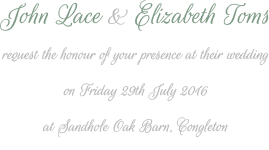
<style>
.page{position:relative;width:269px;height:150px;background:#ffffff}
.page>*{position:absolute;margin:0}
.t1{font:18px "RougeScript-Regular";color:#b9b9b9;font-style:italic}
.t2{font:30px "RougeScript-Regular";color:#7b9883;font-style:italic}
.t3{font:30px "RougeScript-Regular";color:#b9b9b9;font-style:italic}
</style>
<div class="page">
<p class="t1" style="left:0px;top:0px;width:269px;height:138px;text-align:center"><span class="t2">John Lace </span><span class="t3">&amp;</span><span class="t2"> Elizabeth Toms<br><br></span>request the honour of your presence at their wedding<br><br>on Friday 29th July 2016<br><br>at Sandhole Oak Barn, Congleton</p>
</div>
